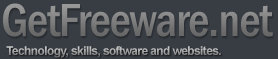
<style>
.page{position:relative;width:278px;height:59px;background:#383d44}
.page>*{position:absolute;margin:0}
.t1{font:48px "FranklinGothic-MediumCond";letter-spacing:-0.025em;color:#7c7c7c}
.t2{font:12px "Arial-BoldMT";letter-spacing:-0.05em}
</style>
<div class="page">
<p class="t1" style="left:3px;top:3px;width:270px;height:34px">GetFreeware.net</p>
<p class="t2" style="left:6px;top:46px;width:215px;height:12px">Technology, skills, software and websites.</p>
</div>
